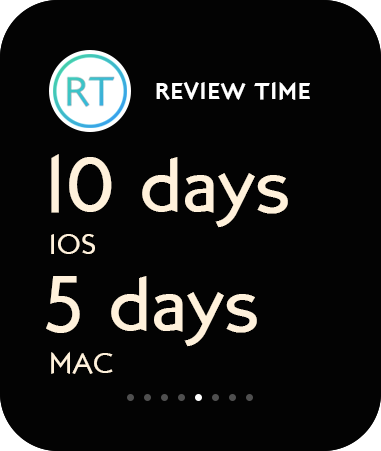
<style>
.page{position:relative;width:381px;height:451px;background:#030303}
.page>*{position:absolute;margin:0}
.t1{font:23.1px "LondonTwo";letter-spacing:0.03em;color:#ffffff;text-transform:uppercase}
.t2{font:80px "LondonBetween";color:#fff1db}
.t3{font:29px "LondonBetween";color:#fff1db;text-transform:uppercase}
</style>
<div class="page">
<p class="t1" style="left:156px;top:82px;width:154px;height:18px">Review TIME</p>
<p class="t2" style="left:51px;top:154px;width:237px;height:74px">10 days</p>
<p class="t3" style="left:51px;top:234px;width:44px;height:20px">iOS</p>
<p class="t2" style="left:46px;top:276px;width:211px;height:71px">5 days</p>
<p class="t3" style="left:51px;top:351px;width:62px;height:23px">Mac</p>
</div>
